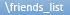
<style>
.page{position:relative;width:70px;height:15px}
.page>*{position:absolute;margin:0}
.t1{font:12px "Calibri";color:#ffffff}
</style>
<div class="page">
<p class="t1" style="left:5px;top:2px;width:59px;height:11px">\friends_list</p>
</div>
